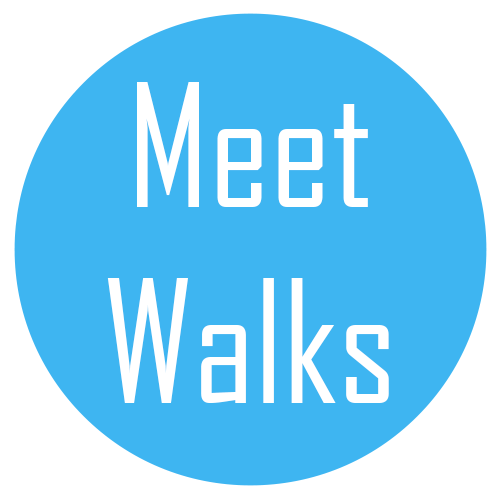
<style>
.page{position:relative;width:500px;height:500px;background:#3eb5f1}
.page>*{position:absolute;margin:0}
.t1{font:39.2px "AgencyFB-Reg";color:#ffffff}
</style>
<div class="page">
<p class="t1" style="left:107px;top:82px;width:282px;height:321px;text-align:center">Meet<br>Walks</p>
</div>
